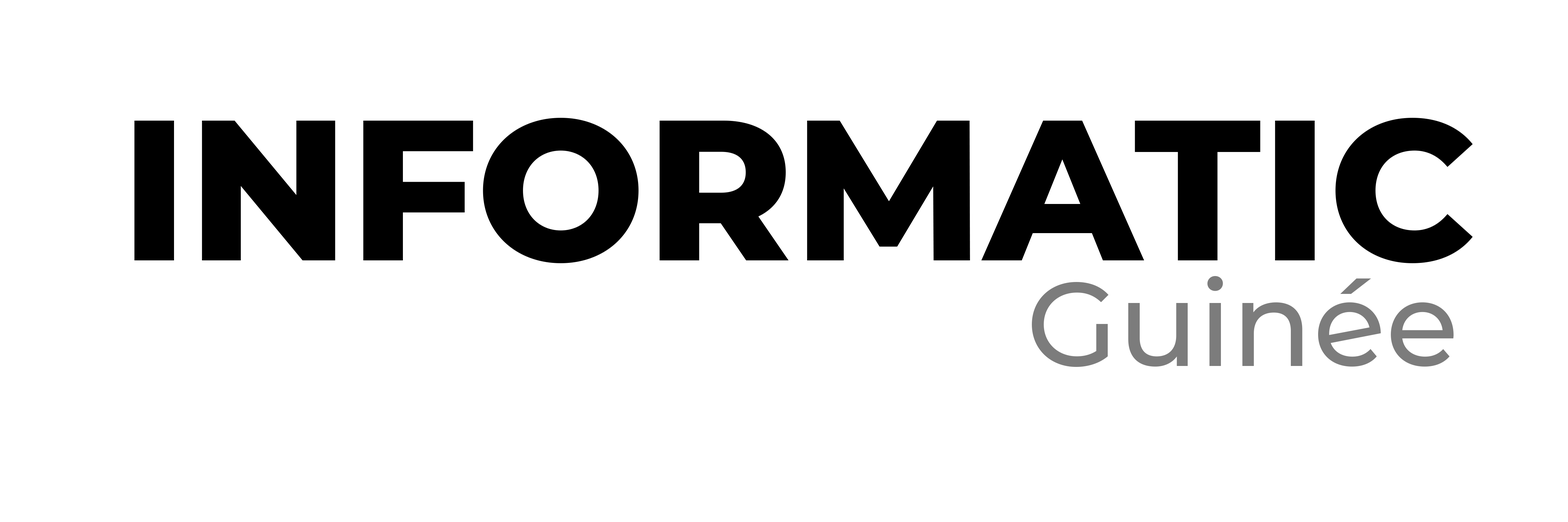
<style>
.page{position:relative;width:1568px;height:522px;background:#ffffff}
.page>*{position:absolute;margin:0}
.t1{font:199.9px "Montserrat-ExtraBold";color:#000000}
.t2{font:118.9px "Montserrat-Medium";color:#7c7c7c}
</style>
<div class="page">
<p class="t1" style="left:134px;top:118px;width:1339px;height:145px">INFORMATIC</p>
<p class="t2" style="left:1032px;top:276px;width:422px;height:91px">Guinée</p>
</div>
